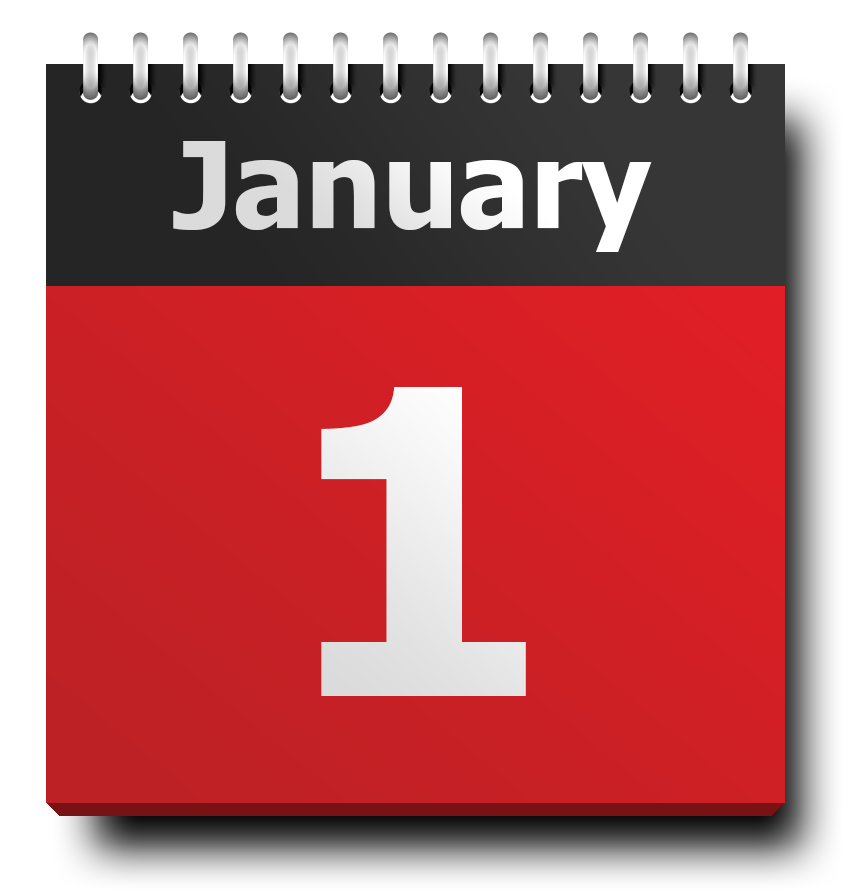
<style>
.page{position:relative;width:842px;height:889px}
.page>*{position:absolute;margin:0}
.t1{font:119.9px "Tahoma-Bold";color:#ececec}
.t2{font:425px "Tahoma-Bold";color:#ffffff}
</style>
<div class="page">
<p class="t1" style="left:173px;top:141px;width:479px;height:111px">January</p>
<p class="t2" style="left:321px;top:387px;width:205px;height:309px">1</p>
</div>
